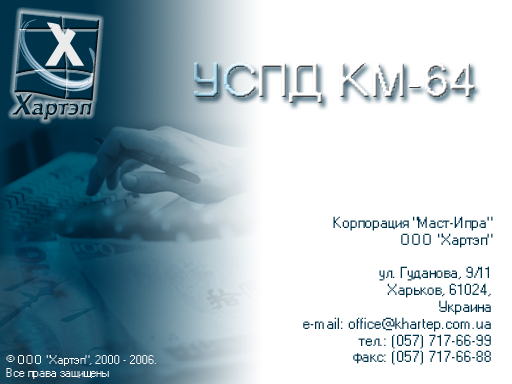
<style>
.page{position:relative;width:512px;height:384px;background:#ffffff}
.page>*{position:absolute;margin:0}
.t1{font:14px "MS Sans Serif";color:#00334a}
.t2{font:11px "MS Sans Serif";color:#ffffff}
</style>
<div class="page">
<p class="t1" style="left:303px;top:216px;width:190px;height:149px;text-align:right">Корпорация "Маст-Ипра"<br>ООО "Хартэп"<br><br>ул. Гуданова, 9/11<br>Харьков, 61024,<br>Украина<br>e-mail: office@khartep.com.ua<br>тел.: (057) 717-66-99<br>факс: (057) 717-66-88</p>
<p class="t2" style="left:6px;top:355px;width:150px;height:24px">© ООО "Хартэп", 2000 - 2006. <br>Все права защищены</p>
</div>
